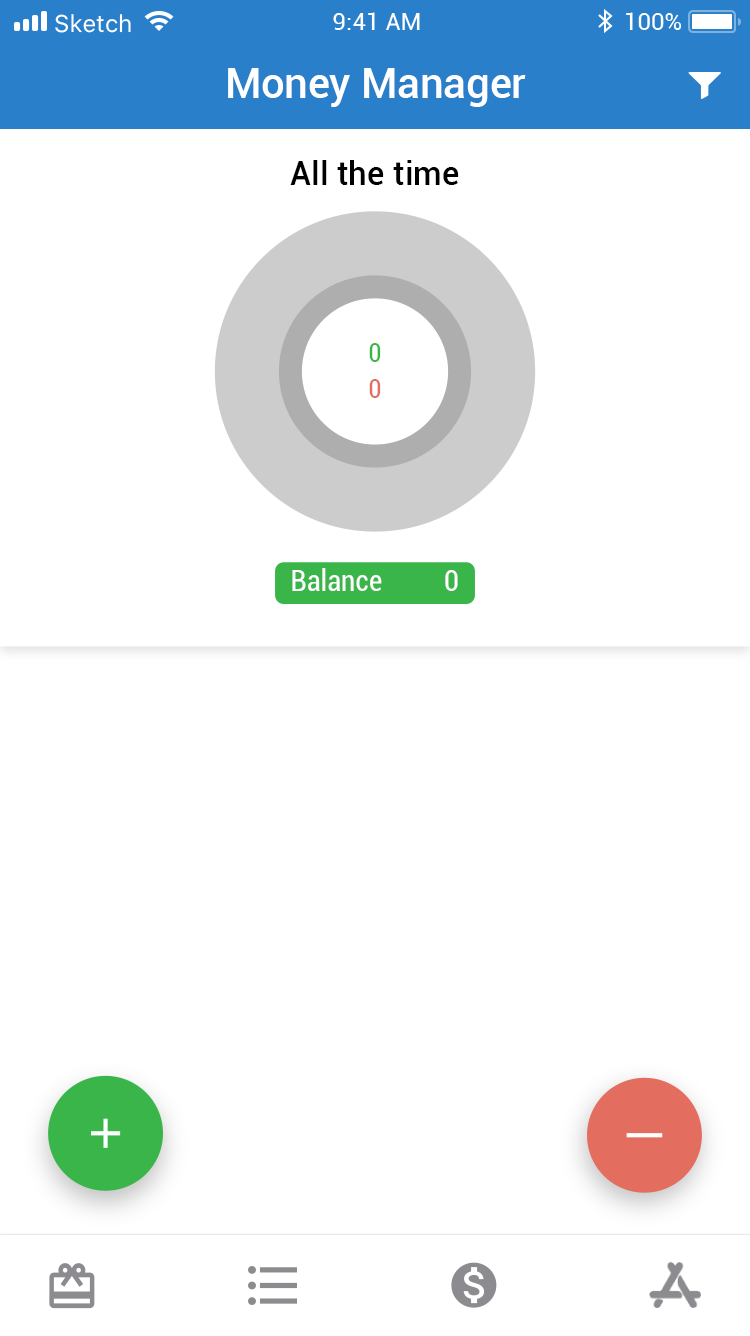
<style>
.page{position:relative;width:750px;height:1336px;background:#ffffff}
.page>*{position:absolute;margin:0}
.t1{font:41.6px "Roboto-Medium";color:#ffffff}
.t2{font:33.4px "Roboto-Medium";color:#000000}
.t3{font:25.1px "Roboto-Condensed";color:#39b54a}
.t4{font:25.1px "Roboto-Condensed";color:#e36d5f}
.t5{font:29.2px "Roboto-Condensed";color:#ffffff}
</style>
<div class="page">
<p class="t1" style="left:228px;top:68px;width:298px;height:39px">Money Manager</p>
<p class="t2" style="left:290px;top:160px;width:169px;height:25px">All the time</p>
<p class="t3" style="left:369px;top:343px;width:12px;height:19px">0</p>
<p class="t4" style="left:369px;top:379px;width:12px;height:19px">0</p>
<p class="t5" style="left:292px;top:568px;width:90px;height:23px">Balance</p>
<p class="t5" style="left:445px;top:570px;width:13px;height:21px">0</p>
</div>
